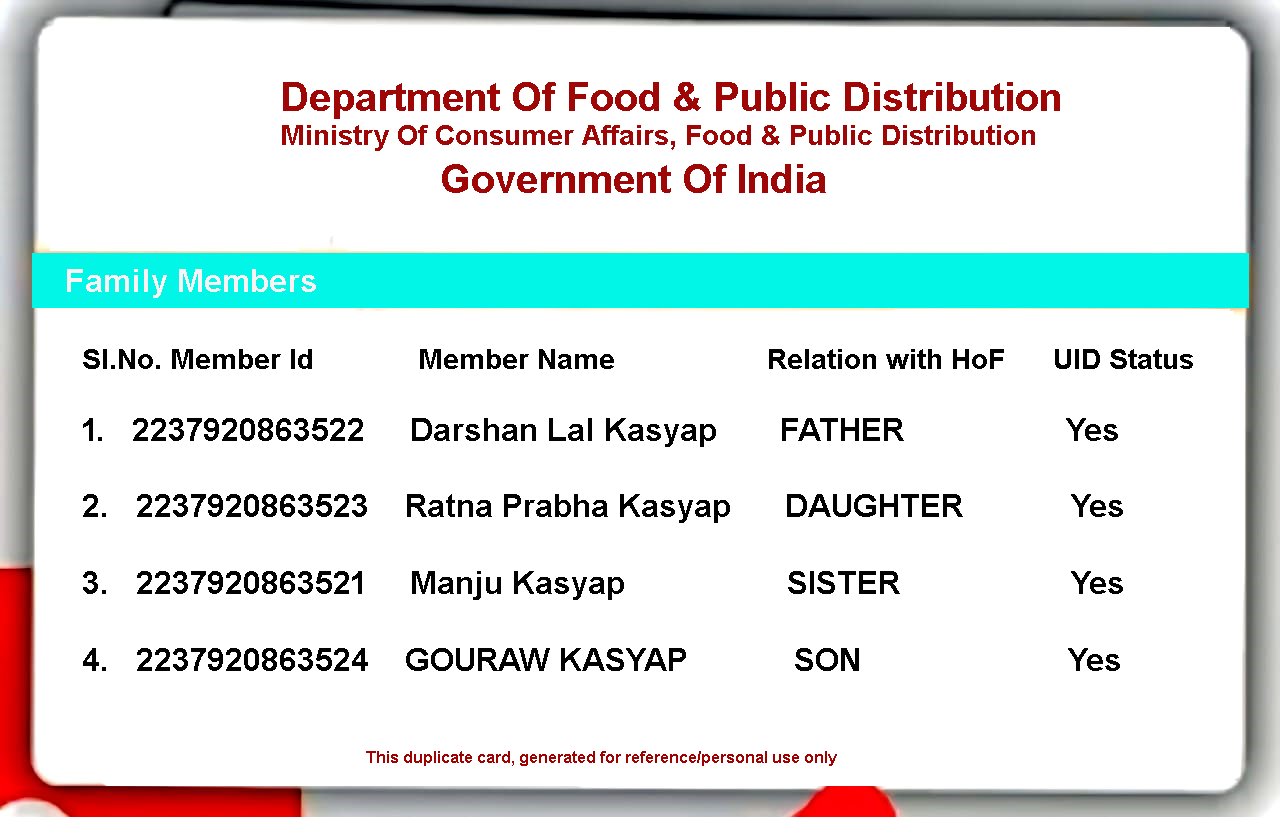
<style>
.page{position:relative;width:1280px;height:817px;background:#ffffff}
.page>*{position:absolute;margin:0}
.t1{font:28px "Arial-BoldMT";color:#9f0606}
.t2{font:40px "Arial-BoldMT";color:#9f0606}
.t3{font:32px "Arial-BoldMT";color:#faf3f3}
.t4{font:32px "Arial-BoldMT";color:#020202}
.t5{font:28px "Arial-BoldMT";color:#020202}
.t6{font:16px "Arial-BoldMT";color:#a00101}
</style>
<div class="page">
<p class="t1" style="left:282px;top:82px;width:778px;height:111px"><span class="t2">Department Of Food &amp; Public Distribution<br></span>Ministry Of Consumer Affairs, Food &amp; Public Distribution<br>                    <span class="t2">Government Of India</span></p>
<p class="t3" style="left:67px;top:269px;width:249px;height:29px">Family Members</p>
<p class="t4" style="left:83px;top:349px;width:1110px;height:322px"><span class="t5">Sl.No. Member Id             Member Name                   Relation with HoF      UID Status<br><br></span>1.   2237920863522     Darshan Lal Kasyap       FATHER                  Yes<br><br>2.   2237920863523    Ratna Prabha Kasyap      DAUGHTER            Yes<br> <br>3.   2237920863521     Manju Kasyap                  SISTER                   Yes<br>   <br>4.   2237920863524    GOURAW KASYAP            SON                       Yes</p>
<p class="t6" style="left:366px;top:751px;width:471px;height:15px">This duplicate card, generated for reference/personal use only</p>
</div>
